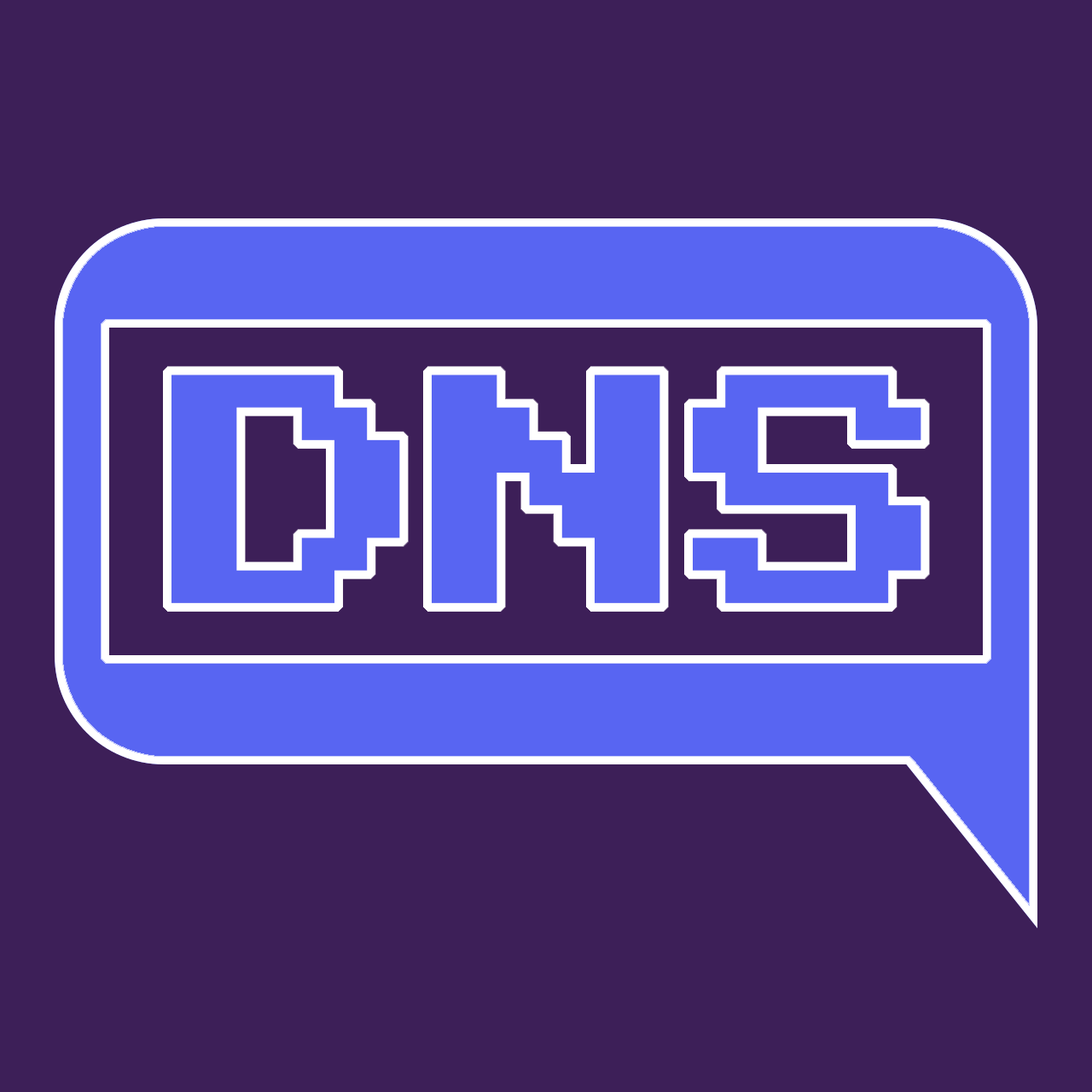
<style>
.page{position:relative;width:1092px;height:1092px;background:#3d1f58}
.page>*{position:absolute;margin:0}
.t1{font:260.6px "PressStart2P-Regular";color:#5865f2}
</style>
<div class="page">
<p class="t1" style="left:171px;top:375px;width:750px;height:228px">DNS</p>
</div>
